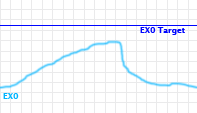
<style>
.page{position:relative;width:197px;height:113px;background:#ffffff}
.page>*{position:absolute;margin:0}
.t1{font:8px "LucidaSans-Demi";color:#0005ff}
.t2{font:8px "LucidaSans-Demi";color:#00b4ff}
</style>
<div class="page">
<p class="t1" style="left:140px;top:27px;width:45px;height:8px">EX0 Target</p>
<p class="t2" style="left:3px;top:93px;width:16px;height:6px">EX0</p>
</div>
